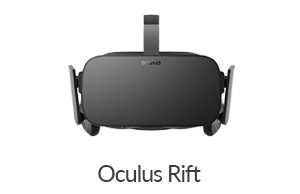
<style>
.page{position:relative;width:300px;height:194px;background:#ffffff}
.page>*{position:absolute;margin:0}
.t1{font:23px "Lato-Regular";letter-spacing:-0.04em;color:#3c3c3c}
</style>
<div class="page">
<p class="t1" style="left:98px;top:165px;width:103px;height:17px">Oculus Rift</p>
</div>
